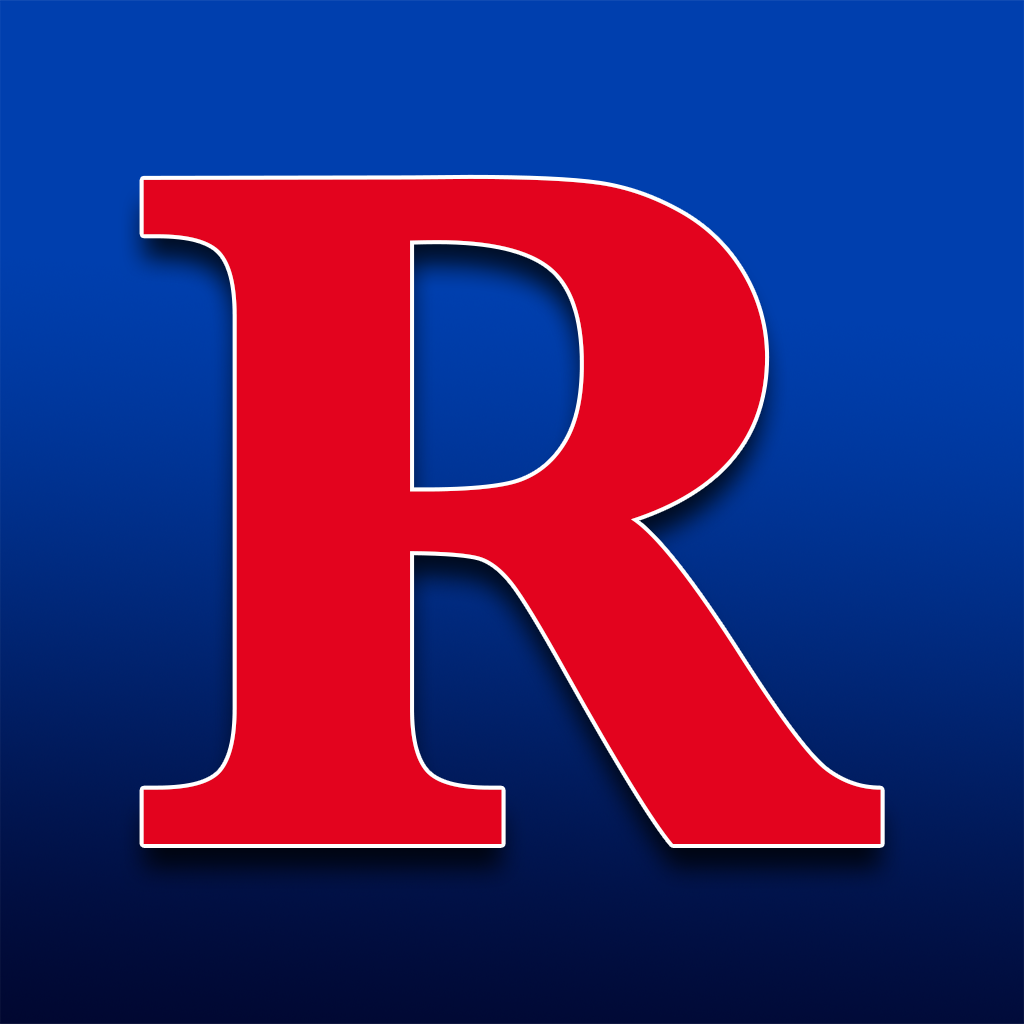
<style>
.page{position:relative;width:1024px;height:1024px;background:#e3031e}
.page>*{position:absolute;margin:0}
.t1{font:1002.5px "Baskerville-Bold";color:#e3031e}
</style>
<div class="page">
<p class="t1" style="left:143px;top:178px;width:738px;height:666px">R</p>
</div>
